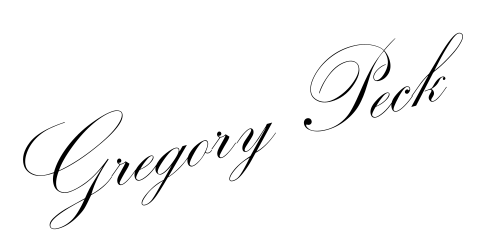
<style>
.page{position:relative;width:500px;height:250px;background:#ffffff}
.page>*{position:absolute;margin:0}
.t1{font:110px "KunstlerScript";color:#000000}
</style>
<div class="page">
<p class="t1" style="left:23px;top:32px;width:440px;height:198px;rotate:-15deg">Gregory Peck</p>
</div>
